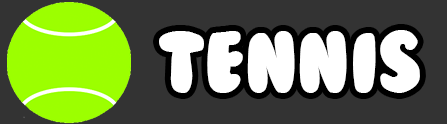
<style>
.page{position:relative;width:447px;height:124px;background:#333333}
.page>*{position:absolute;margin:0}
.t1{font:80px "BubbleGum";color:#ffffff}
</style>
<div class="page">
<p class="t1" style="left:159px;top:30px;width:261px;height:63px">Tennis</p>
</div>
